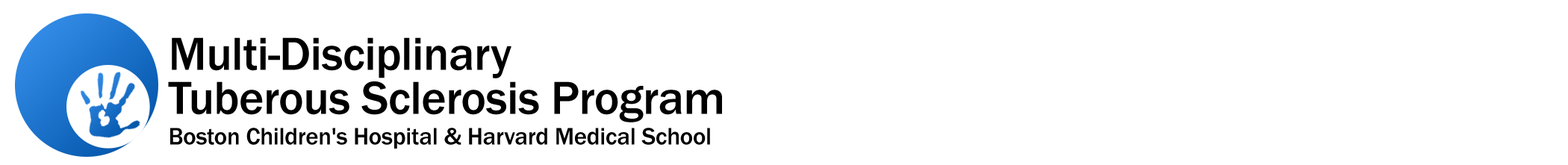
<style>
.page{position:relative;width:1568px;height:165px;background:#ffffff}
.page>*{position:absolute;margin:0}
.t1{font:24.7px/30.6px "FranklinGothicURW-Med";letter-spacing:-0.01em;color:#000000}
.t2{font:47.8px/37.8px "FranklinGothicURW-Med";letter-spacing:-0.01em;color:#000000}
.t3{font:47.8px/44.1px "FranklinGothicURW-Med";letter-spacing:-0.01em;color:#000000}
</style>
<div class="page">
<p class="t1" style="left:168px;top:37px;width:554px;height:112px"><span class="t2">Multi-Disciplinary<br></span><span class="t3">Tuberous Sclerosis Program<br></span>Boston Children's Hospital &amp; Harvard Medical School</p>
</div>
